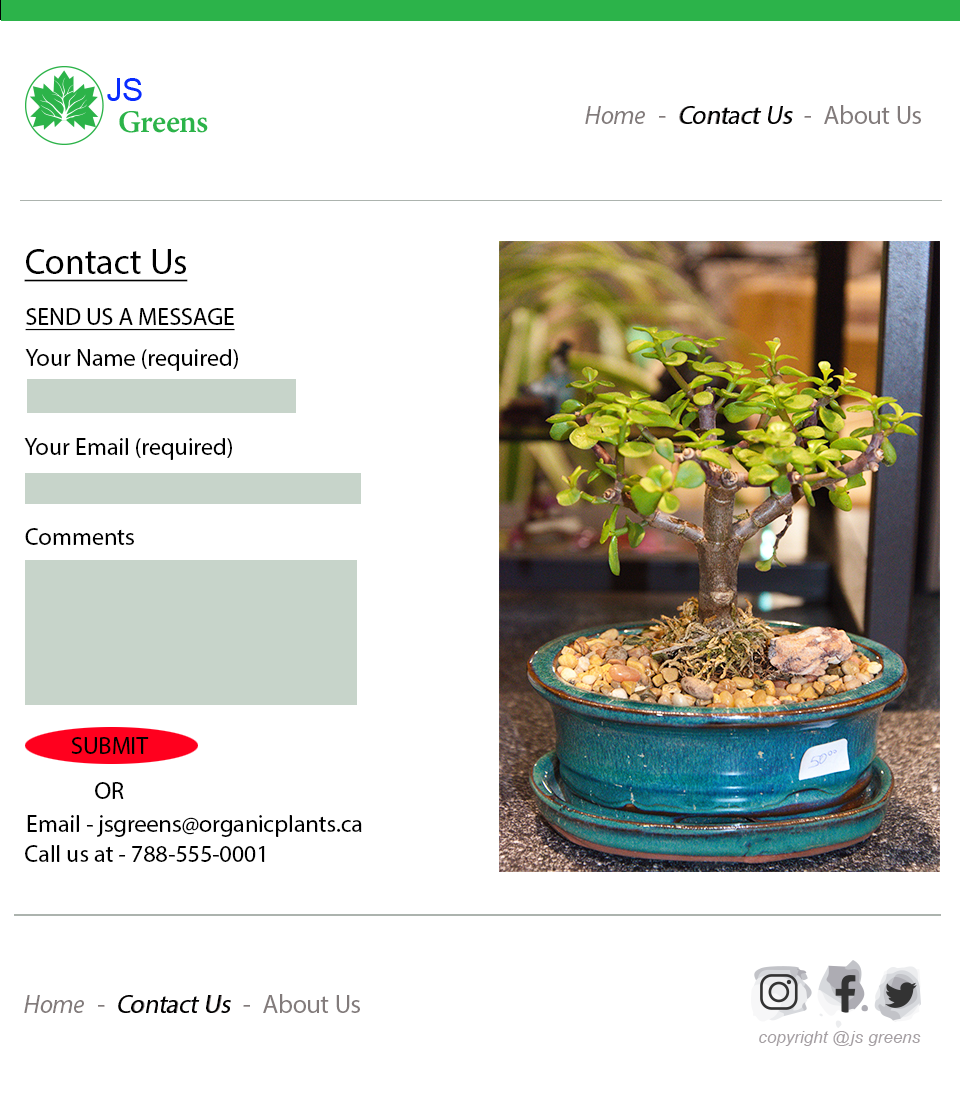
<style>
.page{position:relative;width:960px;height:1093px;background:#ffffff}
.page>*{position:absolute;margin:0}
.t1{font:26px "MyriadPro-Regular";letter-spacing:0.005em;color:#827b7b}
.t2{font:26px "MyriadPro-It";letter-spacing:0.005em;color:#827b7b}
.t3{font:26px "MyriadPro-Regular";letter-spacing:0.005em;color:#827b7b;font-style:italic}
.t4{font:26px "MyriadPro-Regular";letter-spacing:0.005em;color:#000000;font-style:italic}
.t5{font:36px "MyriadPro-Regular";color:#000000;text-decoration:underline}
.t6{font:24px "MyriadPro-Regular";color:#000000;text-decoration:underline}
.t7{font:24px "MyriadPro-Regular";color:#000000}
.t8{font:17.4px "Arial-ItalicMT";letter-spacing:0.005em;color:#a59fa3}
</style>
<div class="page">
<p class="t1" style="left:585px;top:105px;width:336px;height:19px"><span class="t2">Home  </span>-  <span class="t3">Contact Us  </span>-  About Us</p>
<p class="t4" style="left:680px;top:106px;width:113px;height:18px">Contact Us</p>
<p class="t5" style="left:24px;top:249px;width:164px;height:33px">Contact Us</p>
<p class="t6" style="left:25px;top:308px;width:210px;height:23px">SEND US A MESSAGE</p>
<p class="t7" style="left:25px;top:349px;width:213px;height:22px">Your Name (required)</p>
<p class="t7" style="left:24px;top:438px;width:208px;height:22px">Your Email (required)</p>
<p class="t7" style="left:25px;top:528px;width:109px;height:17px">Comments</p>
<p class="t7" style="left:71px;top:737px;width:78px;height:17px">SUBMIT</p>
<p class="t7" style="left:95px;top:782px;width:29px;height:17px">OR</p>
<p class="t7" style="left:27px;top:815px;width:335px;height:22px">Email - jsgreens@organicplants.ca</p>
<p class="t7" style="left:25px;top:845px;width:240px;height:17px">Call us at - 788-555-0001</p>
<p class="t1" style="left:24px;top:994px;width:336px;height:19px"><span class="t2">Home  </span>-  <span class="t3">Contact Us  </span>-  About Us</p>
<p class="t4" style="left:118px;top:995px;width:113px;height:18px">Contact Us</p>
<p class="t8" style="left:759px;top:1031px;width:162px;height:15px">copyright @js greens</p>
</div>
